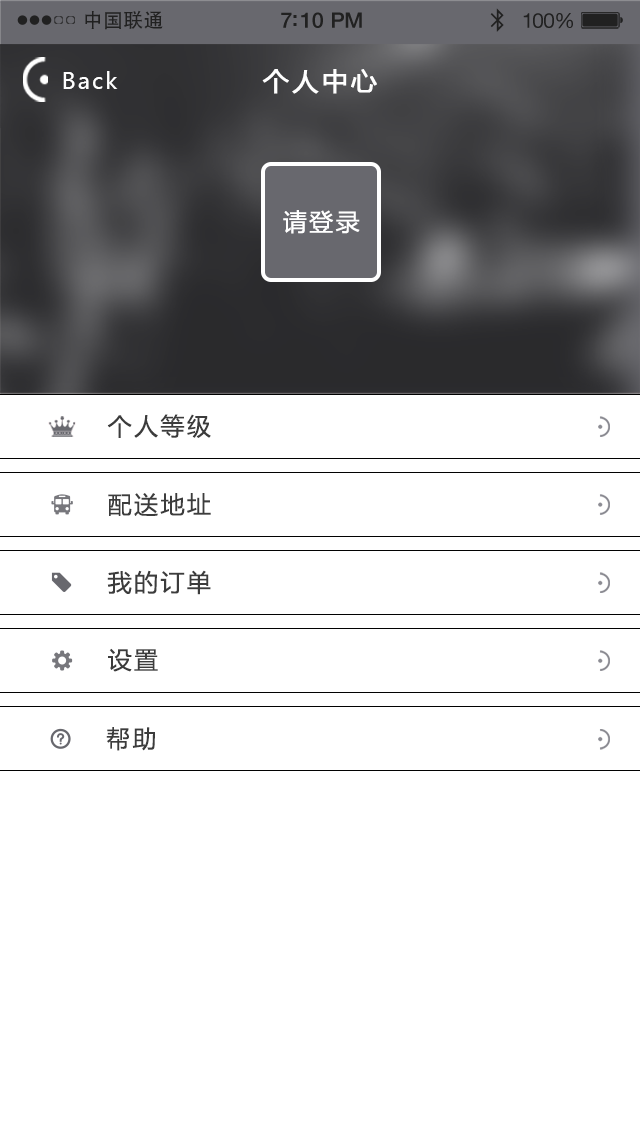
<style>
.page{position:relative;width:640px;height:1136px;background:#ffffff}
.page>*{position:absolute;margin:0}
.t1{font:19.7px "AdobeHeitiStd-Regular";letter-spacing:0.02em;color:#212121}
.t2{font:21.4px "HelveticaNeue-Medium";letter-spacing:-0.02em;color:#212121}
.t3{font:20.6px "HelveticaNeue";letter-spacing:-0.02em;color:#212121}
.t4{font:22px "MicrosoftYaHei";letter-spacing:0.1em;color:#ffffff}
.t5{font:26px "MicrosoftYaHei";letter-spacing:0.1em;color:#ffffff;font-weight:bold}
.t6{font:24px "MicrosoftYaHei";letter-spacing:0.1em;color:#ffffff}
.t7{font:24px "MicrosoftYaHei";letter-spacing:0.1em;color:#3c3c3c}
</style>
<div class="page">
<p class="t1" style="left:85px;top:10px;width:78px;height:20px">中国联通</p>
<p class="t2" style="left:281px;top:12px;width:81px;height:16px">7:10 PM</p>
<p class="t3" style="left:523px;top:13px;width:50px;height:16px">100%</p>
<p class="t4" style="left:63px;top:71px;width:55px;height:18px">Back</p>
<p class="t5" style="left:262px;top:69px;width:115px;height:25px">个人中心</p>
<p class="t6" style="left:283px;top:210px;width:77px;height:24px">请登录</p>
<p class="t7" style="left:107px;top:414px;width:104px;height:24px">个人等级</p>
<p class="t7" style="left:108px;top:493px;width:103px;height:23px">配送地址</p>
<p class="t7" style="left:107px;top:570px;width:104px;height:25px">我的订单</p>
<p class="t7" style="left:108px;top:648px;width:50px;height:24px">设置</p>
<p class="t7" style="left:106px;top:727px;width:49px;height:24px">帮助</p>
</div>
